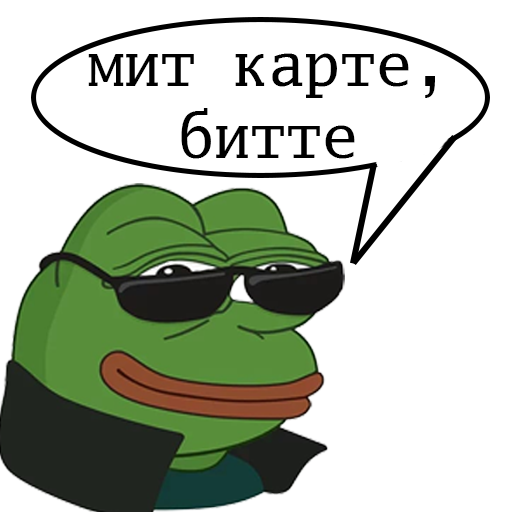
<style>
.page{position:relative;width:512px;height:512px;background:#ffffff}
.page>*{position:absolute;margin:0}
.t1{font:60px "GoMonoForPowerline";color:#000000}
</style>
<div class="page">
<p class="t1" style="left:88px;top:53px;width:347px;height:106px;text-align:center">мит карте,<br>битте</p>
</div>
